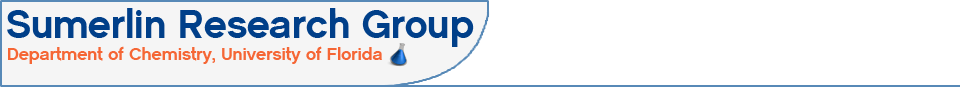
<style>
.page{position:relative;width:960px;height:87px;background:#ffffff}
.page>*{position:absolute;margin:0}
.t1{font:40px "CMSansSerif-Medium";color:#003f89}
.t2{font:18px "CMSansSerif-Medium";color:#f56635}
</style>
<div class="page">
<p class="t1" style="left:7px;top:8px;width:467px;height:39px">Sumerlin Research Group</p>
<p class="t2" style="left:8px;top:46px;width:374px;height:18px">Department of Chemistry, University of Florida</p>
</div>
